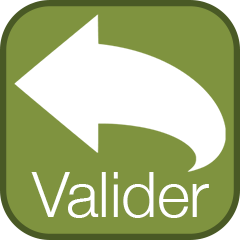
<style>
.page{position:relative;width:240px;height:240px;background:#7f933f}
.page>*{position:absolute;margin:0}
.t1{font:62.5px "HelveticaNeue-Light";color:#ffffff}
</style>
<div class="page">
<p class="t1" style="left:31px;top:172px;width:178px;height:46px">Valider</p>
</div>
